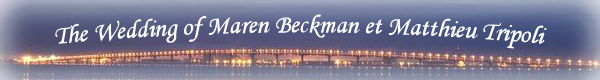
<style>
.page{position:relative;width:600px;height:80px}
.page>*{position:absolute;margin:0}
.t1{font:26px "MonotypeCorsiva";color:#ffffff}
</style>
<div class="page">
<p class="t1" style="left:55px;top:14px;width:492px;height:35px">The Wedding of Maren Beckman et Matthieu Tripoli</p>
</div>
